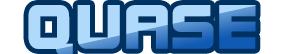
<style>
.page{position:relative;width:286px;height:54px;background:#003261}
.page>*{position:absolute;margin:0}
.t1{font:69.3px "DFSoGeiStd-W9";scale:0.92 1}
</style>
<div class="page">
<p class="t1" style="left:28px;top:5px;width:228px;height:50px">QUASE</p>
</div>
